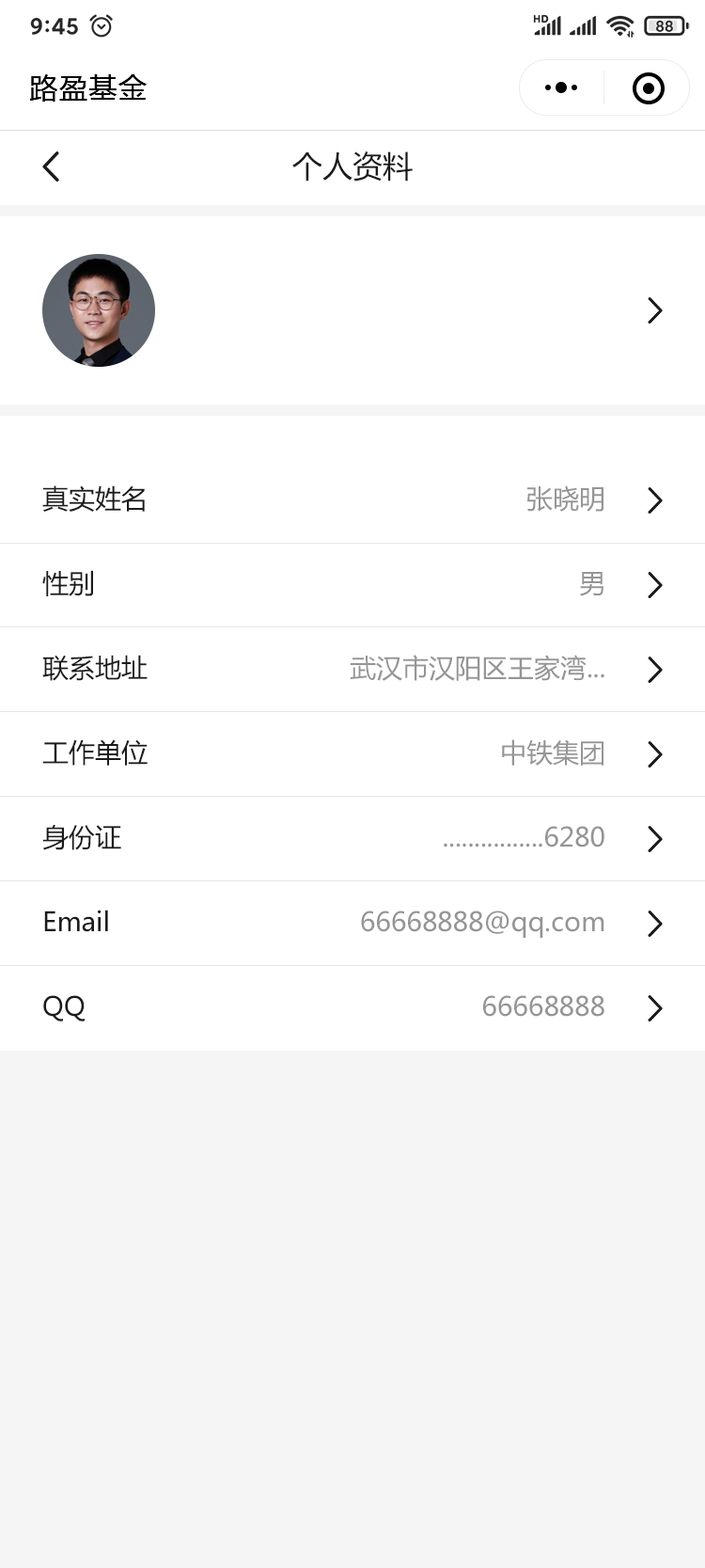
<style>
.page{position:relative;width:705px;height:1568px;background:#ffffff}
.page>*{position:absolute;margin:0}
.t1{font:28.2px "MicrosoftYaHei";letter-spacing:0.05em;color:#000000}
.t2{font:30.1px "MicrosoftYaHei";color:#1b1b1b}
.t3{font:26.3px/84.7px "MicrosoftYaHei";color:#1b1b1b}
.t4{font:26.3px/84.7px "MicrosoftYaHei";color:#959595}
</style>
<div class="page">
<p class="t1" style="left:29px;top:74px;width:118px;height:28px">路盈基金</p>
<p class="t2" style="left:293px;top:151px;width:120px;height:31px">个人资料</p>
<p class="t3" style="left:42px;top:485px;width:106px;height:537px">真实姓名<br>性别<br>联系地址<br>工作单位<br>身份证<br>Email<br>QQ</p>
<p class="t4" style="left:350px;top:485px;width:255px;height:532px;text-align:right">张晓明<br>男<br>武汉市汉阳区王家湾...<br>中铁集团<br>................6280<br>66668888@qq.com<br>66668888</p>
</div>
